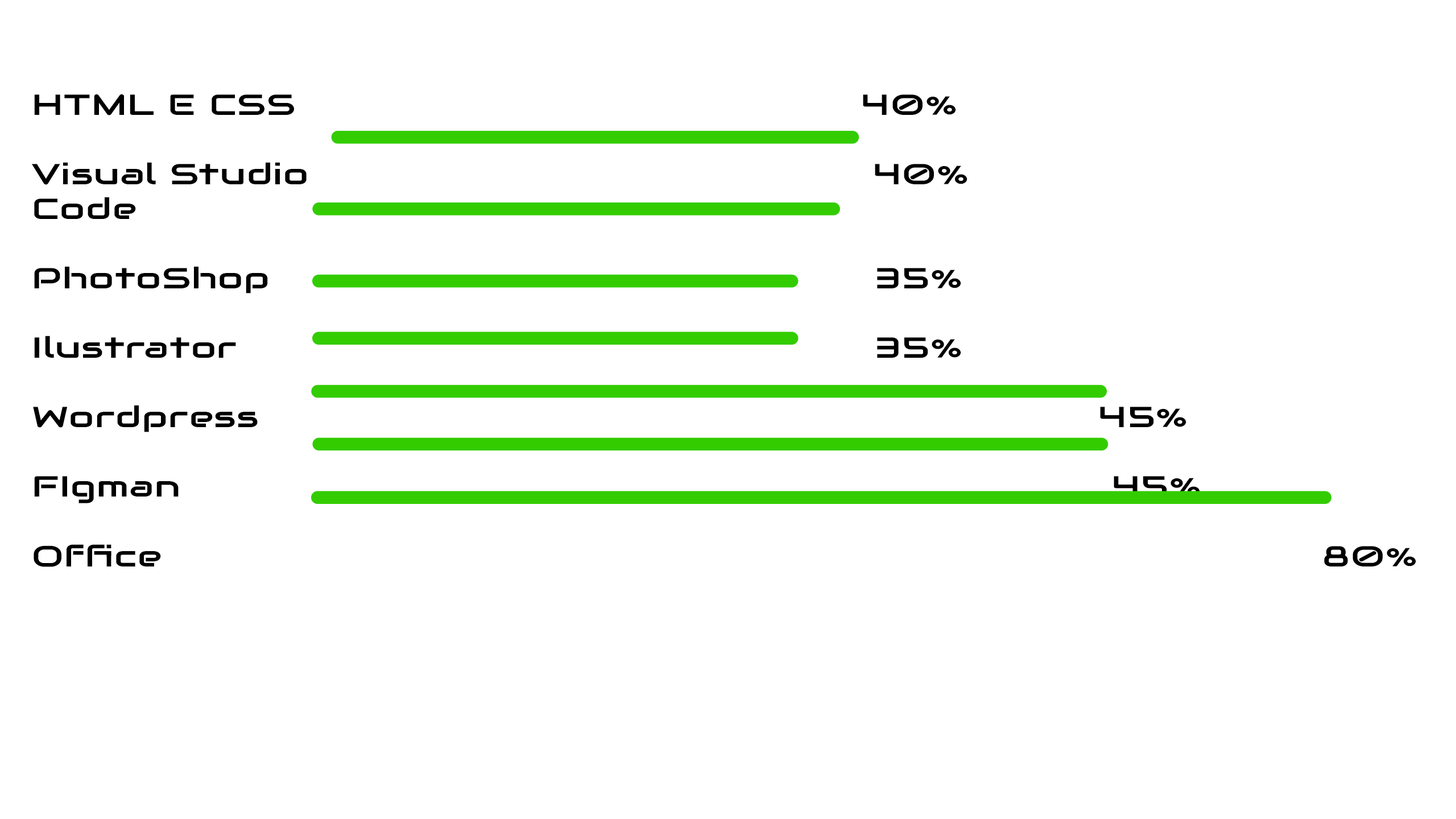
<style>
.page{position:relative;width:1456px;height:819px;background:#ffffff}
.page>*{position:absolute;margin:0}
.t1{font:28.9px "Audiowide-Regular";letter-spacing:0.025em;color:#000000;scale:1.26 1}
</style>
<div class="page">
<p class="t1" style="left:31px;top:94px;width:1385px;height:473px">HTML E CSS                               40%<br><br>Visual Studio                                            40% <br>Code                                <br><br>PhotoShop                        35%<br><br>Ilustrator                           35%<br><br>Wordpress                                 45%<br><br>FIgman                                    45%<br><br>Office                                             80%</p>
</div>
